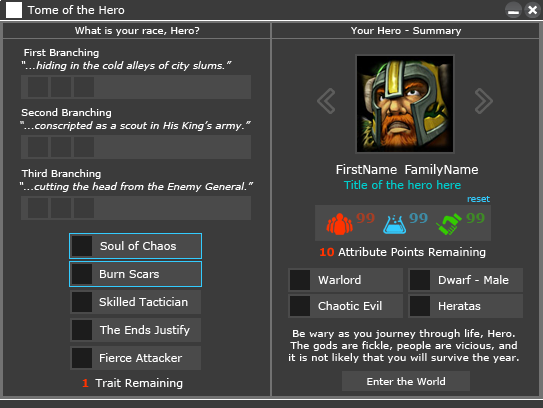
<style>
.page{position:relative;width:543px;height:408px;background:#3b3b3b}
.page>*{position:absolute;margin:0}
.t1{font:11px "Verdana";color:#ffffff}
.t2{font:10px "Verdana";color:#ffffff}
.t3{font:10px "Verdana-Italic";color:#ffffff}
.t4{font:12px "Verdana";color:#ffffff}
.t5{font:11px "Verdana";color:#00cccc}
.t6{font:9px "Verdana";color:#33ccff}
.t7{font:14px "Verdana-Bold";color:#a53e25}
.t8{font:14px "Verdana-Bold";color:#3e8ba5}
.t9{font:14px "Verdana-Bold";color:#3e8b25}
.t10{font:11px "Verdana-Bold";color:#ff3300}
.t11{font:10px/12px "Verdana";letter-spacing:0.02em;color:#ffffff}
.t12{font:11px "Verdana";color:#feffff}
</style>
<div class="page">
<p class="t1" style="left:27px;top:5px;width:98px;height:9px">Tome of the Hero</p>
<p class="t2" style="left:75px;top:26px;width:125px;height:10px">What is your race, Hero?</p>
<p class="t2" style="left:351px;top:27px;width:111px;height:9px">Your Hero - Summary</p>
<p class="t2" style="left:24px;top:48px;width:75px;height:10px">First Branching</p>
<p class="t3" style="left:21px;top:61px;width:211px;height:10px">“...hiding in the cold alleys of city slums.”</p>
<p class="t2" style="left:21px;top:108px;width:90px;height:10px">Second Branching</p>
<p class="t3" style="left:20px;top:121px;width:231px;height:10px">“...conscripted as a scout in His King’s army.”</p>
<p class="t2" style="left:21px;top:169px;width:80px;height:10px">Third Branching</p>
<p class="t4" style="left:336px;top:164px;width:61px;height:10px">FirstName</p>
<p class="t4" style="left:405px;top:164px;width:73px;height:12px">FamilyName</p>
<p class="t3" style="left:19px;top:182px;width:235px;height:10px">“...cutting the head from the Enemy General.”</p>
<p class="t5" style="left:343px;top:180px;width:118px;height:9px">Title of the hero here</p>
<p class="t6" style="left:467px;top:196px;width:23px;height:6px">reset</p>
<p class="t7" style="left:356px;top:213px;width:19px;height:10px">99</p>
<p class="t8" style="left:409px;top:213px;width:19px;height:10px">99</p>
<p class="t9" style="left:466px;top:213px;width:19px;height:10px">99</p>
<p class="t1" style="left:100px;top:241px;width:76px;height:9px">Soul of Chaos</p>
<p class="t10" style="left:320px;top:247px;width:14px;height:10px">10</p>
<p class="t1" style="left:338px;top:247px;width:148px;height:11px">Attribute Points Remaining</p>
<p class="t1" style="left:100px;top:270px;width:59px;height:8px">Burn Scars</p>
<p class="t1" style="left:318px;top:275px;width:43px;height:9px">Warlord</p>
<p class="t1" style="left:439px;top:275px;width:70px;height:9px">Dwarf - Male</p>
<p class="t1" style="left:99px;top:297px;width:89px;height:9px">Skilled Tactician</p>
<p class="t1" style="left:318px;top:301px;width:64px;height:9px">Chaotic Evil</p>
<p class="t1" style="left:439px;top:302px;width:42px;height:8px">Heratas</p>
<p class="t1" style="left:99px;top:325px;width:91px;height:11px">The Ends Justify</p>
<p class="t11" style="left:289px;top:329px;width:230px;height:34px;text-align:center">Be wary as you journey through life, Hero.<br>The gods are fickle, people are vicious, and<br>it is not likely that you will survive the year.</p>
<p class="t1" style="left:100px;top:353px;width:83px;height:9px">Fierce Attacker</p>
<p class="t2" style="left:367px;top:377px;width:78px;height:8px">Enter the World</p>
<p class="t10" style="left:82px;top:379px;width:7px;height:8px">1</p>
<p class="t12" style="left:95px;top:378px;width:88px;height:11px">Trait Remaining</p>
</div>
